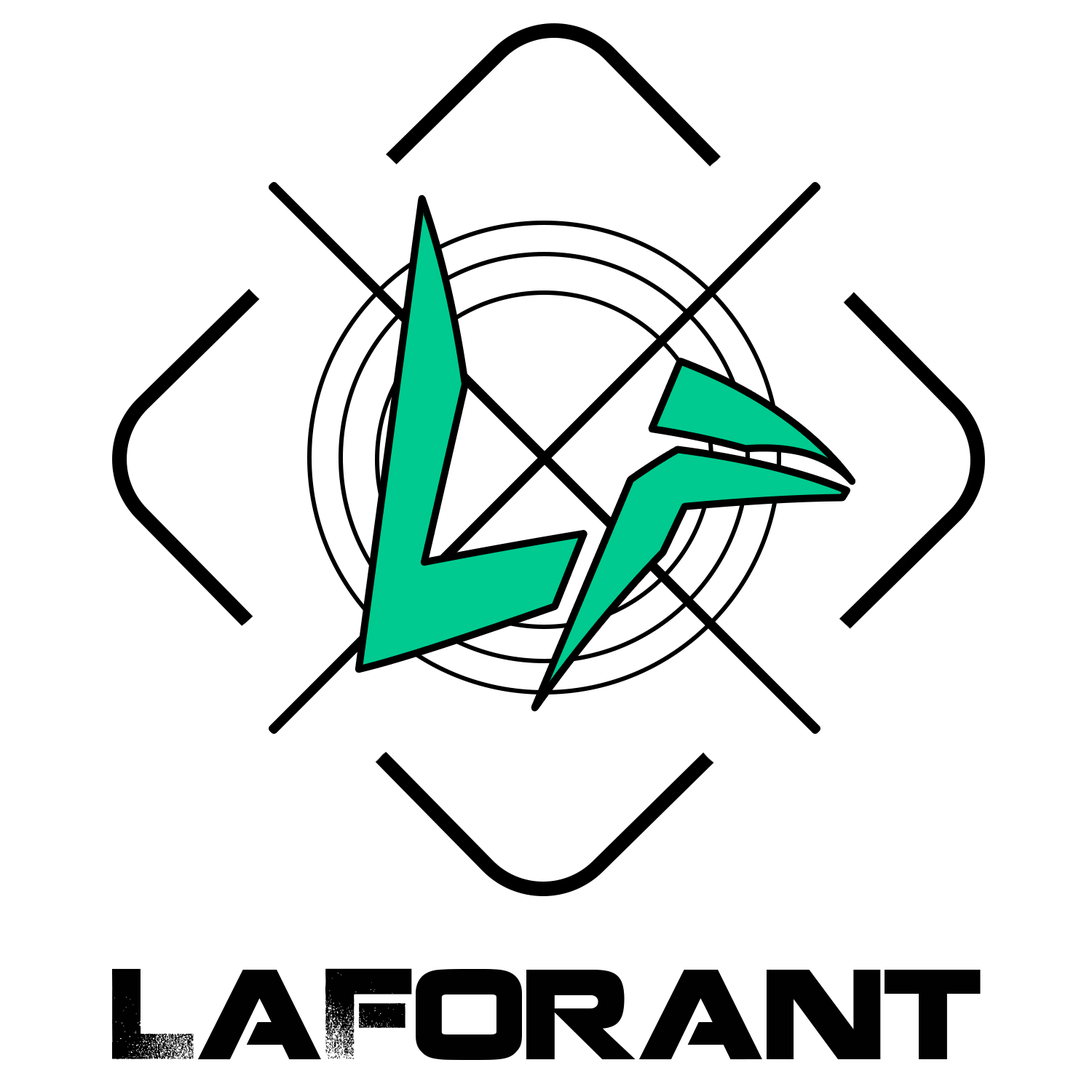
<style>
.page{position:relative;width:1092px;height:1092px;background:#ffffff}
.page>*{position:absolute;margin:0}
.t1{font:350.8px "LethalInjector-Bold";color:#00ca8f;scale:1.15 1}
.t2{font:126.4px "Coalition";color:#010101;scale:0.91 1}
</style>
<div class="page">
<p class="t1" style="left:358px;top:198px;width:494px;height:510px;rotate:1deg">LF</p>
<p class="t2" style="left:112px;top:968px;width:869px;height:92px">LaForant</p>
</div>
